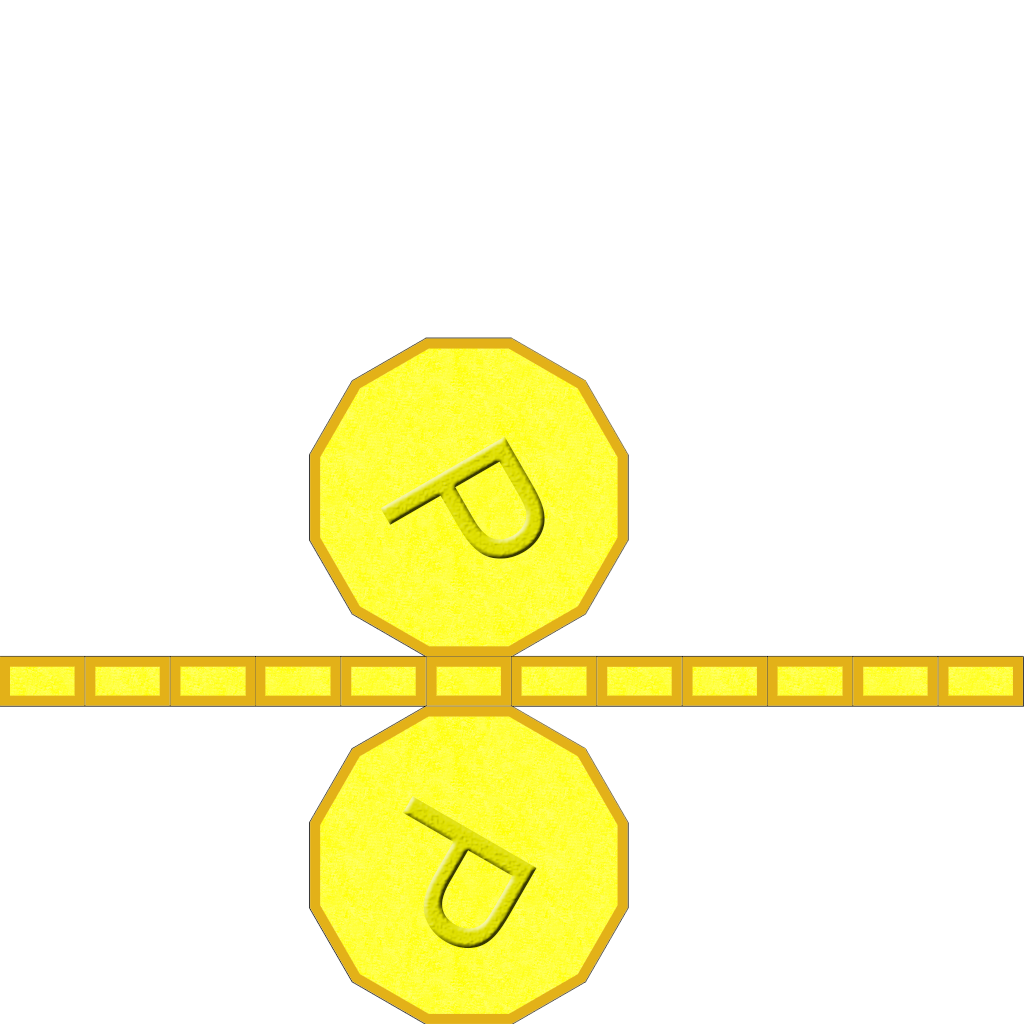
<style>
.page{position:relative;width:1024px;height:1024px;background:#ffffff}
.page>*{position:absolute;margin:0}
.t1{font:200px "ArialMT";color:#dfdf00}
</style>
<div class="page">
<p class="t1" style="left:380px;top:436px;width:165px;height:123px;rotate:60deg">P</p>
<p class="t1" style="left:403px;top:796px;width:134px;height:153px;rotate:120deg">P</p>
</div>
